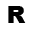
<style>
.page{position:relative;width:32px;height:32px;background:#ffffff}
.page>*{position:absolute;margin:0}
.t1{font:24px "Arial-Black";color:#000000}
</style>
<div class="page">
<p class="t1" style="left:8px;top:6px;width:18px;height:17px">R</p>
</div>
